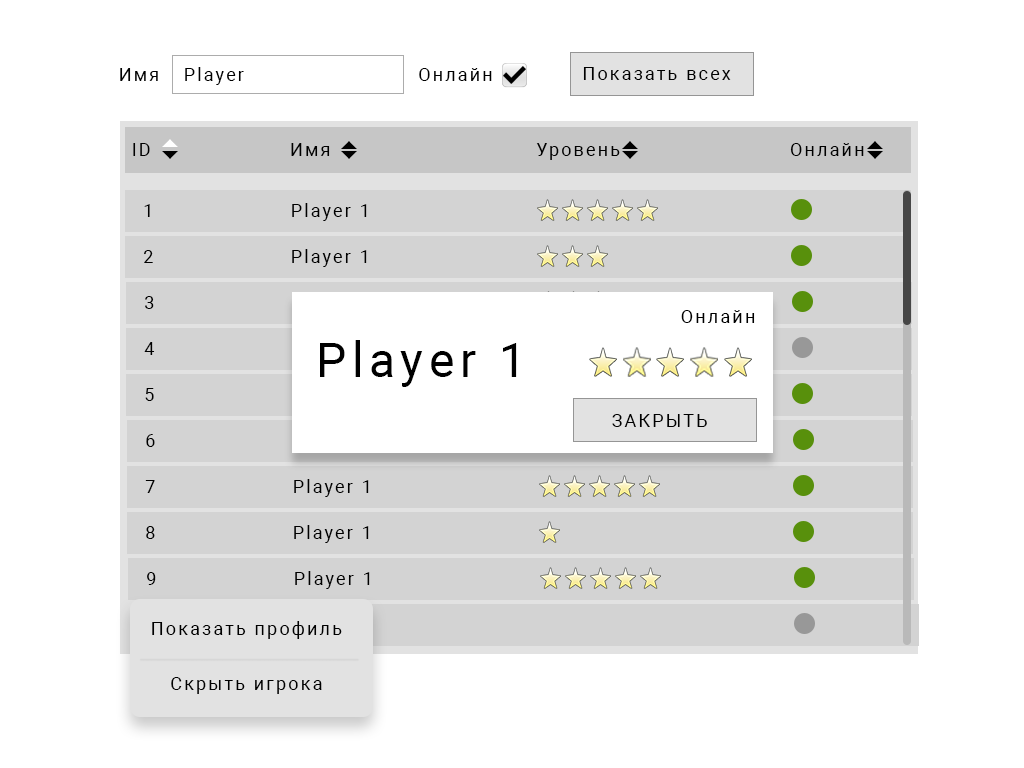
<style>
.page{position:relative;width:1024px;height:768px;background:#ffffff}
.page>*{position:absolute;margin:0}
.t1{font:18px "Roboto-Regular";letter-spacing:0.12em;color:#000000}
.t2{font:48px "Roboto-Regular";letter-spacing:0.12em;color:#000000}
</style>
<div class="page">
<p class="t1" style="left:120px;top:68px;width:38px;height:13px">Имя</p>
<p class="t1" style="left:185px;top:67px;width:59px;height:18px">Player</p>
<p class="t1" style="left:419px;top:68px;width:73px;height:13px">Онлайн</p>
<p class="t1" style="left:583px;top:67px;width:148px;height:13px">Показать всех</p>
<p class="t1" style="left:133px;top:143px;width:17px;height:13px">ID</p>
<p class="t1" style="left:291px;top:143px;width:39px;height:13px">Имя</p>
<p class="t1" style="left:536px;top:143px;width:84px;height:17px">Уровень</p>
<p class="t1" style="left:790px;top:143px;width:74px;height:13px">Онлайн</p>
<p class="t1" style="left:144px;top:204px;width:6px;height:13px">1</p>
<p class="t1" style="left:292px;top:203px;width:75px;height:18px">Player 1</p>
<p class="t1" style="left:144px;top:250px;width:9px;height:13px">2</p>
<p class="t1" style="left:292px;top:249px;width:75px;height:18px">Player 1</p>
<p class="t1" style="left:145px;top:296px;width:9px;height:13px">3</p>
<p class="t1" style="left:681px;top:310px;width:74px;height:13px">Онлайн</p>
<p class="t1" style="left:144px;top:342px;width:11px;height:13px">4</p>
<p class="t2" style="left:320px;top:340px;width:197px;height:47px">Player 1</p>
<p class="t1" style="left:145px;top:388px;width:9px;height:13px">5</p>
<p class="t1" style="left:612px;top:414px;width:95px;height:13px">ЗАКРЫТЬ</p>
<p class="t1" style="left:146px;top:434px;width:9px;height:13px">6</p>
<p class="t1" style="left:145px;top:480px;width:10px;height:13px">7</p>
<p class="t1" style="left:294px;top:479px;width:75px;height:18px">Player 1</p>
<p class="t1" style="left:146px;top:526px;width:9px;height:13px">8</p>
<p class="t1" style="left:294px;top:525px;width:75px;height:18px">Player 1</p>
<p class="t1" style="left:147px;top:572px;width:9px;height:13px">9</p>
<p class="t1" style="left:295px;top:571px;width:75px;height:18px">Player 1</p>
<p class="t1" style="left:152px;top:621px;width:190px;height:18px">Показать профиль</p>
<p class="t1" style="left:171px;top:677px;width:151px;height:17px">Скрыть игрока</p>
</div>
